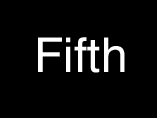
<style>
.page{position:relative;width:157px;height:118px;background:#000000}
.page>*{position:absolute;margin:0}
.t1{font:48px "Helvetica";color:#ffffff}
</style>
<div class="page">
<p class="t1" style="left:38px;top:37px;width:87px;height:36px">Fifth</p>
</div>
